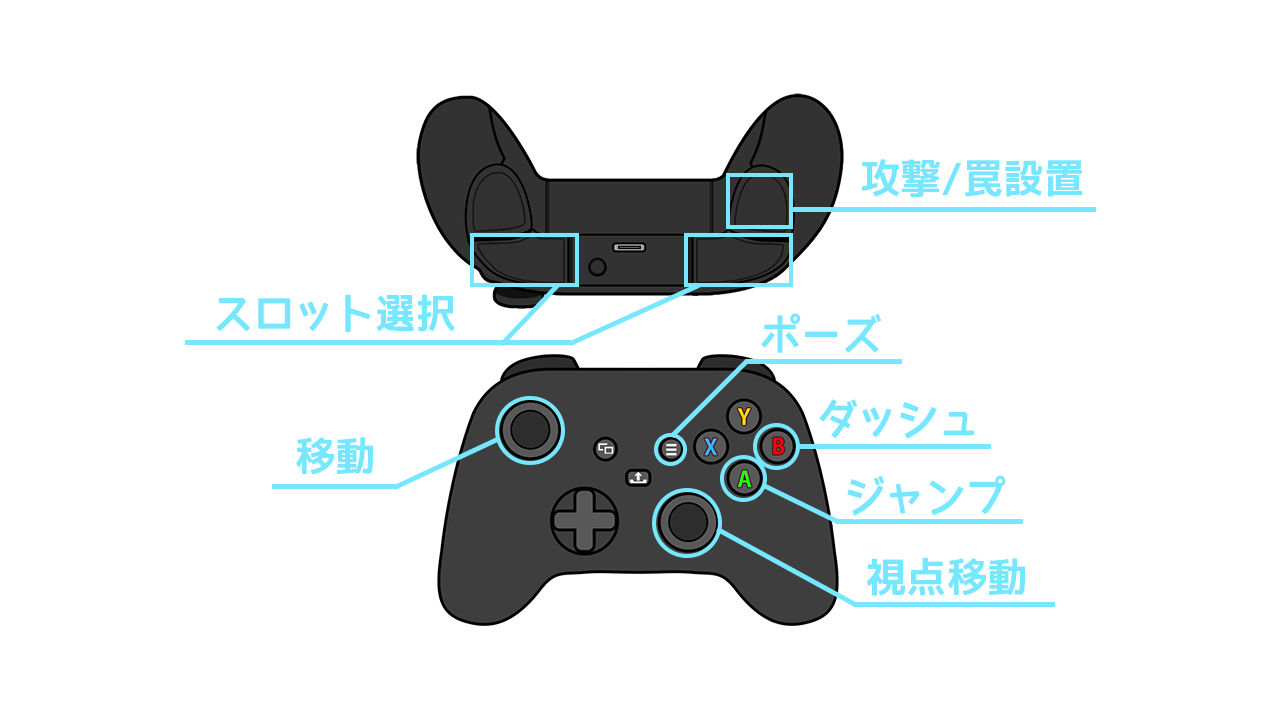
<style>
.page{position:relative;width:1280px;height:720px;background:#ffffff}
.page>*{position:absolute;margin:0}
.t1{font:41.6px "YasashisaGothicBoldV2-bold";letter-spacing:-0.001em;color:#76e7ff}
</style>
<div class="page">
<p class="t1" style="left:861px;top:159px;width:222px;height:38px">攻撃/罠設置</p>
<p class="t1" style="left:216px;top:294px;width:239px;height:38px">スロット選択</p>
<p class="t1" style="left:761px;top:313px;width:121px;height:40px">ポーズ</p>
<p class="t1" style="left:819px;top:399px;width:155px;height:40px">ダッシュ</p>
<p class="t1" style="left:296px;top:437px;width:77px;height:38px">移動</p>
<p class="t1" style="left:847px;top:475px;width:159px;height:41px">ジャンプ</p>
<p class="t1" style="left:867px;top:557px;width:158px;height:39px">視点移動</p>
</div>
